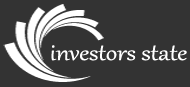
<style>
.page{position:relative;width:190px;height:87px;background:#333333}
.page>*{position:absolute;margin:0}
.t1{font:27px "Gabriola";color:#ffffff;scale:1.18 1}
</style>
<div class="page">
<p class="t1" style="left:51px;top:45px;width:136px;height:16px">investors state</p>
</div>
